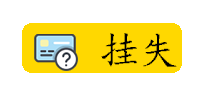
<style>
.page{position:relative;width:200px;height:100px;background:#ffffff}
.page>*{position:absolute;margin:0}
.t1{font:40px "¿¬Ìå";color:#000000}
</style>
<div class="page">
<p class="t1" style="left:101px;top:33px;width:76px;height:34px">挂失</p>
</div>
